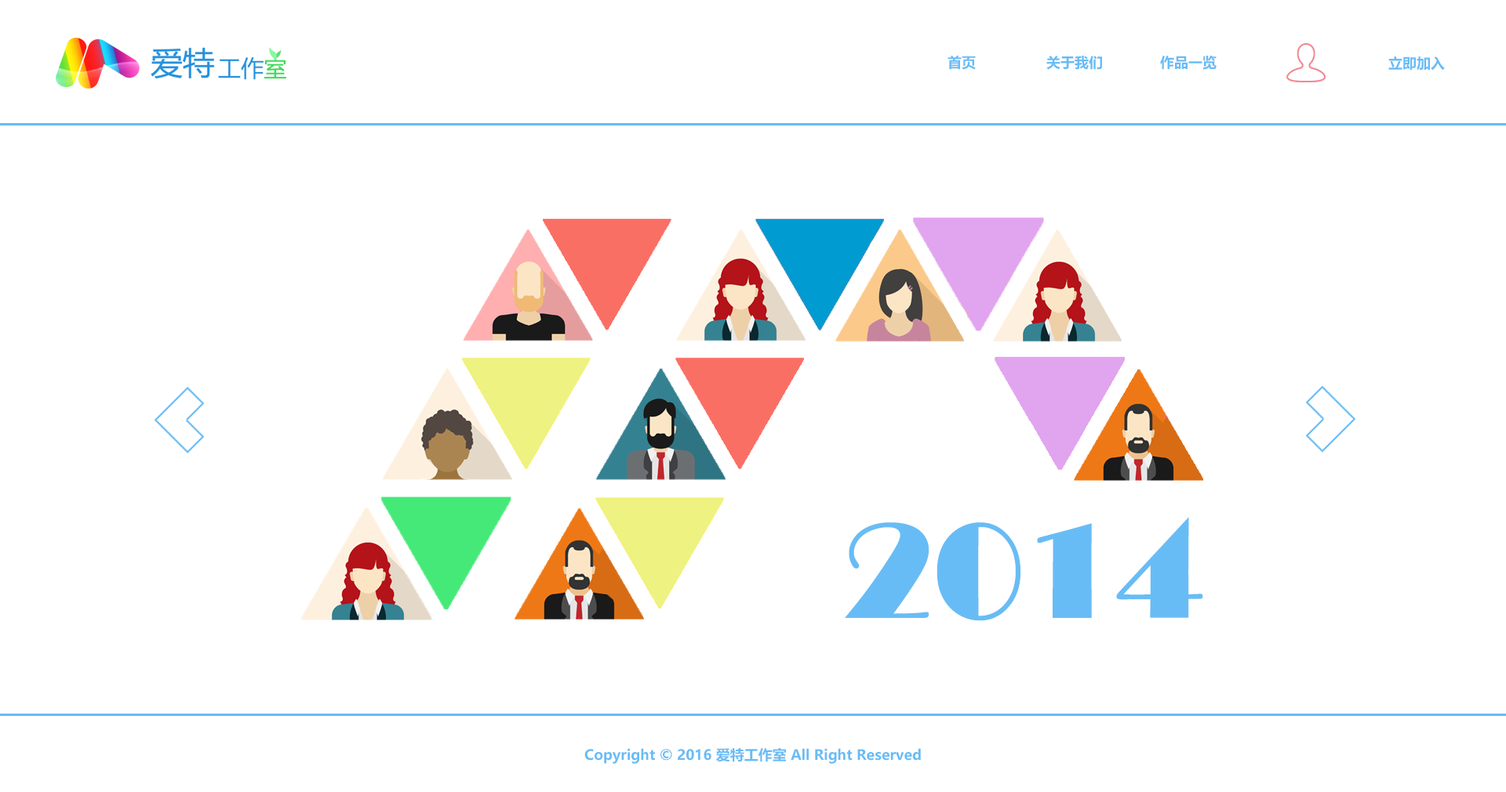
<style>
.page{position:relative;width:1506px;height:792px;background:#ffffff}
.page>*{position:absolute;margin:0}
.t1{font:14.1px "MicrosoftYaHei-Bold";color:#68bcf5}
.t2{font:139.6px "Broadway";color:#68bcf5}
</style>
<div class="page">
<p class="t1" style="left:947px;top:55px;width:28px;height:15px">首页</p>
<p class="t1" style="left:1046px;top:56px;width:56px;height:14px">关于我们</p>
<p class="t1" style="left:1160px;top:56px;width:56px;height:14px">作品一览</p>
<p class="t1" style="left:1388px;top:56px;width:56px;height:15px">立即加入</p>
<p class="t2" style="left:845px;top:517px;width:358px;height:104px">2014</p>
<p class="t1" style="left:584px;top:748px;width:337px;height:16px">Copyright © 2016 爱特工作室 All Right Reserved</p>
</div>
